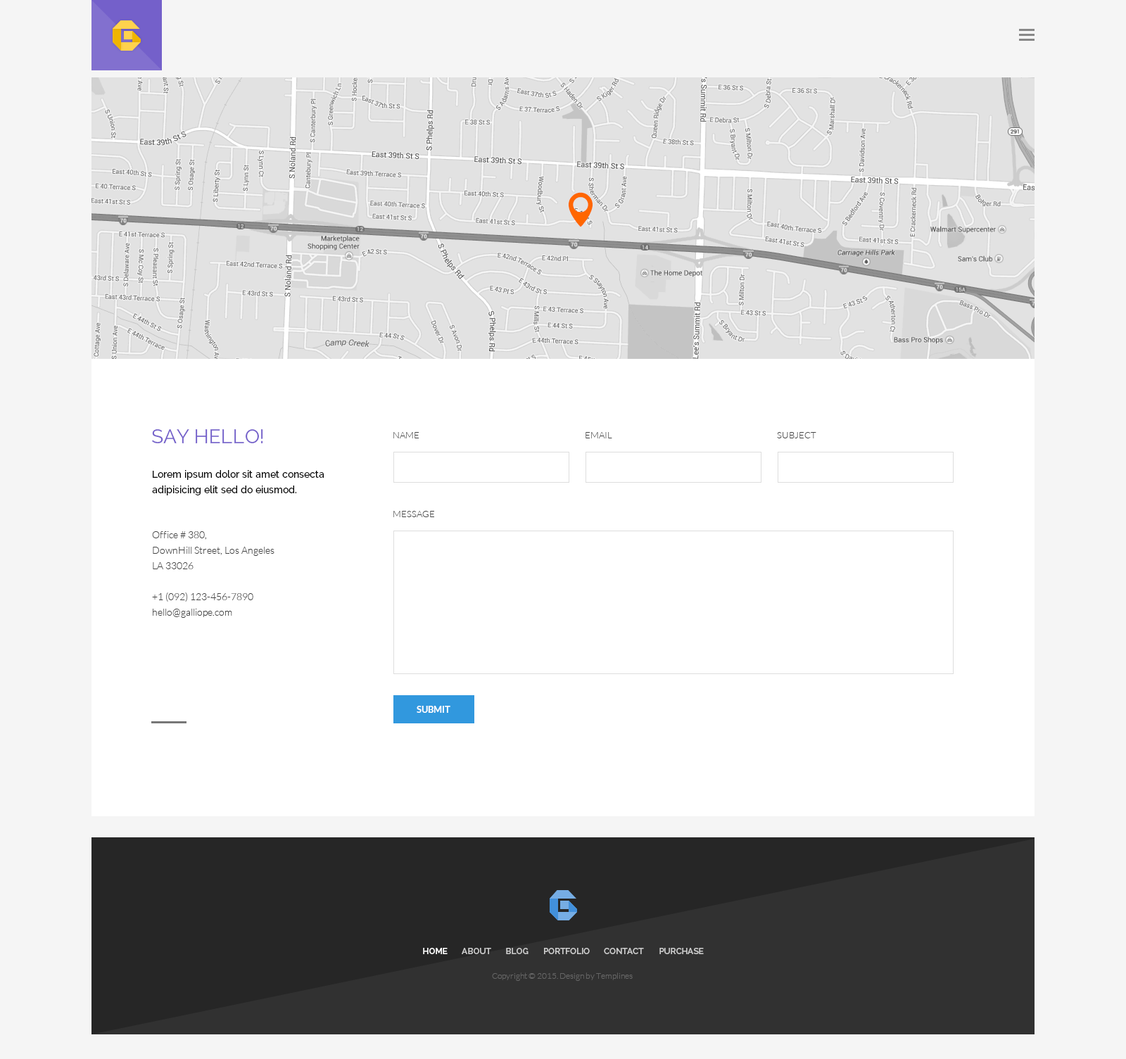
<style>
.page{position:relative;width:1126px;height:1059px;background:#ffffff}
.page>*{position:absolute;margin:0}
.t1{font:19.7px "Raleway-Regular";color:#7460ca}
.t2{font:9.1px "Lato-Light";color:#444444;text-transform:uppercase}
.t3{font:9.1px "Lato-Light";color:#444444}
.t4{font:9.9px/15.5px "Raleway-Medium";color:#000000}
.t5{font:9.9px/15.5px "Lato-Light";color:#444444}
.t6{font:9.1px "Lato-Bold";color:#ffffff;text-transform:uppercase}
.t7{font:8.4px "Raleway-SemiBold";color:#ffffff}
.t8{font:8.4px "Raleway-SemiBold";color:#cccccc}
.t9{font:8.4px "Lato-Light";color:#666666}
</style>
<div class="page">
<p class="t1" style="left:152px;top:429px;width:111px;height:14px">SAY HELLO!</p>
<p class="t2" style="left:393px;top:432px;width:26px;height:6px">Name</p>
<p class="t3" style="left:585px;top:432px;width:27px;height:6px">EMAIL</p>
<p class="t3" style="left:777px;top:432px;width:39px;height:6px">SUBJECT</p>
<p class="t4" style="left:152px;top:470px;width:172px;height:25px">Lorem ipsum dolor sit amet consecta<br>adipisicing elit sed do eiusmod.</p>
<p class="t2" style="left:393px;top:511px;width:41px;height:6px">MESSAGE</p>
<p class="t5" style="left:152px;top:531px;width:122px;height:87px">Office # 380, <br>DownHill Street, Los Angeles <br>LA 33026<br><br>+1 (092) 123-456-7890<br>hello@galliope.com</p>
<p class="t6" style="left:417px;top:706px;width:33px;height:7px">SUBMIT</p>
<p class="t7" style="left:423px;top:948px;width:25px;height:6px">HOME</p>
<p class="t8" style="left:462px;top:948px;width:29px;height:6px">ABOUT</p>
<p class="t8" style="left:506px;top:948px;width:22px;height:6px">BLOG</p>
<p class="t8" style="left:544px;top:948px;width:46px;height:6px">PORTFOLIO</p>
<p class="t8" style="left:604px;top:948px;width:40px;height:6px">CONTACT</p>
<p class="t8" style="left:659px;top:948px;width:45px;height:6px">PURCHASE</p>
<p class="t9" style="left:492px;top:973px;width:141px;height:8px">Copyright © 2015. Design by Templines</p>
</div>
